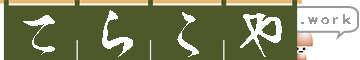
<style>
.page{position:relative;width:360px;height:60px;background:#4e592b}
.page>*{position:absolute;margin:0}
.t1{font:60px "SouryuTtf";letter-spacing:0.2em;color:#ffffff}
.t2{font:14px "DFMaruGothic-SB-MP-RKSJ-H";letter-spacing:0.2em;color:#999999}
</style>
<div class="page">
<p class="t1" style="left:23px;top:15px;width:32px;height:40px">て</p>
<p class="t1" style="left:102px;top:10px;width:31px;height:47px">ら</p>
<p class="t1" style="left:177px;top:12px;width:22px;height:45px">こ</p>
<p class="t1" style="left:240px;top:13px;width:42px;height:44px">や</p>
<p class="t2" style="left:301px;top:14px;width:50px;height:10px">.work</p>
</div>
